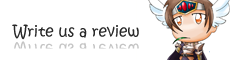
<style>
.page{position:relative;width:230px;height:60px;background:#ffffff}
.page>*{position:absolute;margin:0}
.t1{font:15px "KristenITC-Regular";color:#282828}
.t2{font:15px "KristenITC-Regular"}
</style>
<div class="page">
<p class="t1" style="left:12px;top:24px;width:127px;height:16px">Write us a review</p>
<p class="t2" style="left:12px;top:41px;width:127px;height:15px">Write us a review</p>
</div>
